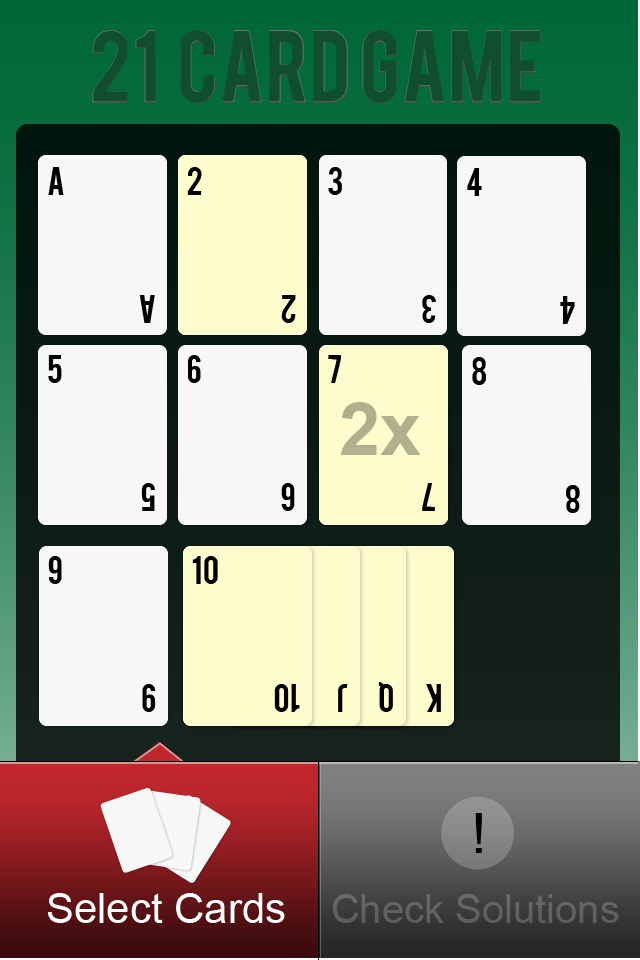
<style>
.page{position:relative;width:640px;height:960px;background:#f7f7f7}
.page>*{position:absolute;margin:0}
.t1{font:79.6px "Bebas";letter-spacing:0.01em;color:#114e30}
.t2{font:30.7px "Bebas";color:#000000}
.t3{font:74.4px "Arial-BoldMT";color:#b0b08f}
.t4{font:55.7px "ArialMT";color:#000000}
.t5{font:42px "ArialMT";color:#ffffff}
.t6{font:40px "ArialMT";color:#616161}
</style>
<div class="page">
<p class="t1" style="left:92px;top:28px;width:449px;height:72px">21  CARD GAME</p>
<p class="t1" style="left:92px;top:30px;width:449px;height:72px">21  CARD GAME</p>
<p class="t1" style="left:92px;top:31px;width:449px;height:72px">21  CARD GAME</p>
<p class="t2" style="left:48px;top:167px;width:16px;height:28px">A</p>
<p class="t2" style="left:187px;top:167px;width:15px;height:28px">2</p>
<p class="t2" style="left:187px;top:167px;width:15px;height:28px">2</p>
<p class="t2" style="left:187px;top:167px;width:15px;height:28px">2</p>
<p class="t2" style="left:328px;top:167px;width:14px;height:28px">3</p>
<p class="t2" style="left:467px;top:168px;width:15px;height:28px">4</p>
<p class="t2" style="left:139px;top:295px;width:16px;height:28px">A</p>
<p class="t2" style="left:281px;top:295px;width:15px;height:28px">2</p>
<p class="t2" style="left:281px;top:295px;width:15px;height:28px">2</p>
<p class="t2" style="left:281px;top:295px;width:15px;height:28px">2</p>
<p class="t2" style="left:422px;top:295px;width:14px;height:28px">3</p>
<p class="t2" style="left:560px;top:296px;width:15px;height:28px">4</p>
<p class="t2" style="left:48px;top:355px;width:14px;height:28px">5</p>
<p class="t2" style="left:188px;top:355px;width:13px;height:28px">6</p>
<p class="t2" style="left:328px;top:355px;width:13px;height:28px">7</p>
<p class="t2" style="left:328px;top:355px;width:13px;height:28px">7</p>
<p class="t2" style="left:472px;top:357px;width:14px;height:28px">8</p>
<p class="t3" style="left:341px;top:402px;width:80px;height:53px">2x</p>
<p class="t2" style="left:141px;top:483px;width:14px;height:28px">5</p>
<p class="t2" style="left:281px;top:483px;width:14px;height:28px">6</p>
<p class="t2" style="left:422px;top:483px;width:13px;height:28px">7</p>
<p class="t2" style="left:422px;top:483px;width:13px;height:28px">7</p>
<p class="t2" style="left:566px;top:485px;width:14px;height:28px">8</p>
<p class="t2" style="left:48px;top:556px;width:14px;height:28px">9</p>
<p class="t2" style="left:192px;top:556px;width:26px;height:28px">10</p>
<p class="t2" style="left:192px;top:556px;width:26px;height:28px">10</p>
<p class="t2" style="left:142px;top:684px;width:14px;height:28px">9</p>
<p class="t2" style="left:274px;top:684px;width:26px;height:28px">10</p>
<p class="t2" style="left:274px;top:684px;width:26px;height:28px">10</p>
<p class="t2" style="left:338px;top:684px;width:10px;height:28px">J</p>
<p class="t2" style="left:338px;top:684px;width:10px;height:28px">J</p>
<p class="t2" style="left:378px;top:682px;width:15px;height:30px">Q</p>
<p class="t2" style="left:378px;top:682px;width:15px;height:30px">Q</p>
<p class="t2" style="left:426px;top:684px;width:15px;height:28px">K</p>
<p class="t2" style="left:426px;top:684px;width:15px;height:28px">K</p>
<p class="t4" style="left:475px;top:813px;width:7px;height:40px">!</p>
<p class="t4" style="left:475px;top:813px;width:7px;height:40px">!</p>
<p class="t4" style="left:475px;top:813px;width:7px;height:40px">!</p>
<p class="t5" style="left:47px;top:893px;width:238px;height:30px">Select Cards</p>
<p class="t5" style="left:47px;top:893px;width:238px;height:30px">Select Cards</p>
<p class="t5" style="left:47px;top:893px;width:238px;height:30px">Select Cards</p>
<p class="t6" style="left:333px;top:894px;width:286px;height:29px">Check Solutions</p>
<p class="t6" style="left:333px;top:894px;width:286px;height:29px">Check Solutions</p>
<p class="t6" style="left:333px;top:894px;width:286px;height:29px">Check Solutions</p>
</div>
